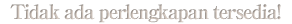
<style>
.page{position:relative;width:292px;height:24px;background:#ffffff}
.page>*{position:absolute;margin:0}
.t1{font:20px "RyuminPro-ExBold";letter-spacing:-0.08em}
</style>
<div class="page">
<p class="t1" style="left:10px;top:4px;width:271px;height:19px">Tidak ada perlengkapan tersedia!</p>
</div>
